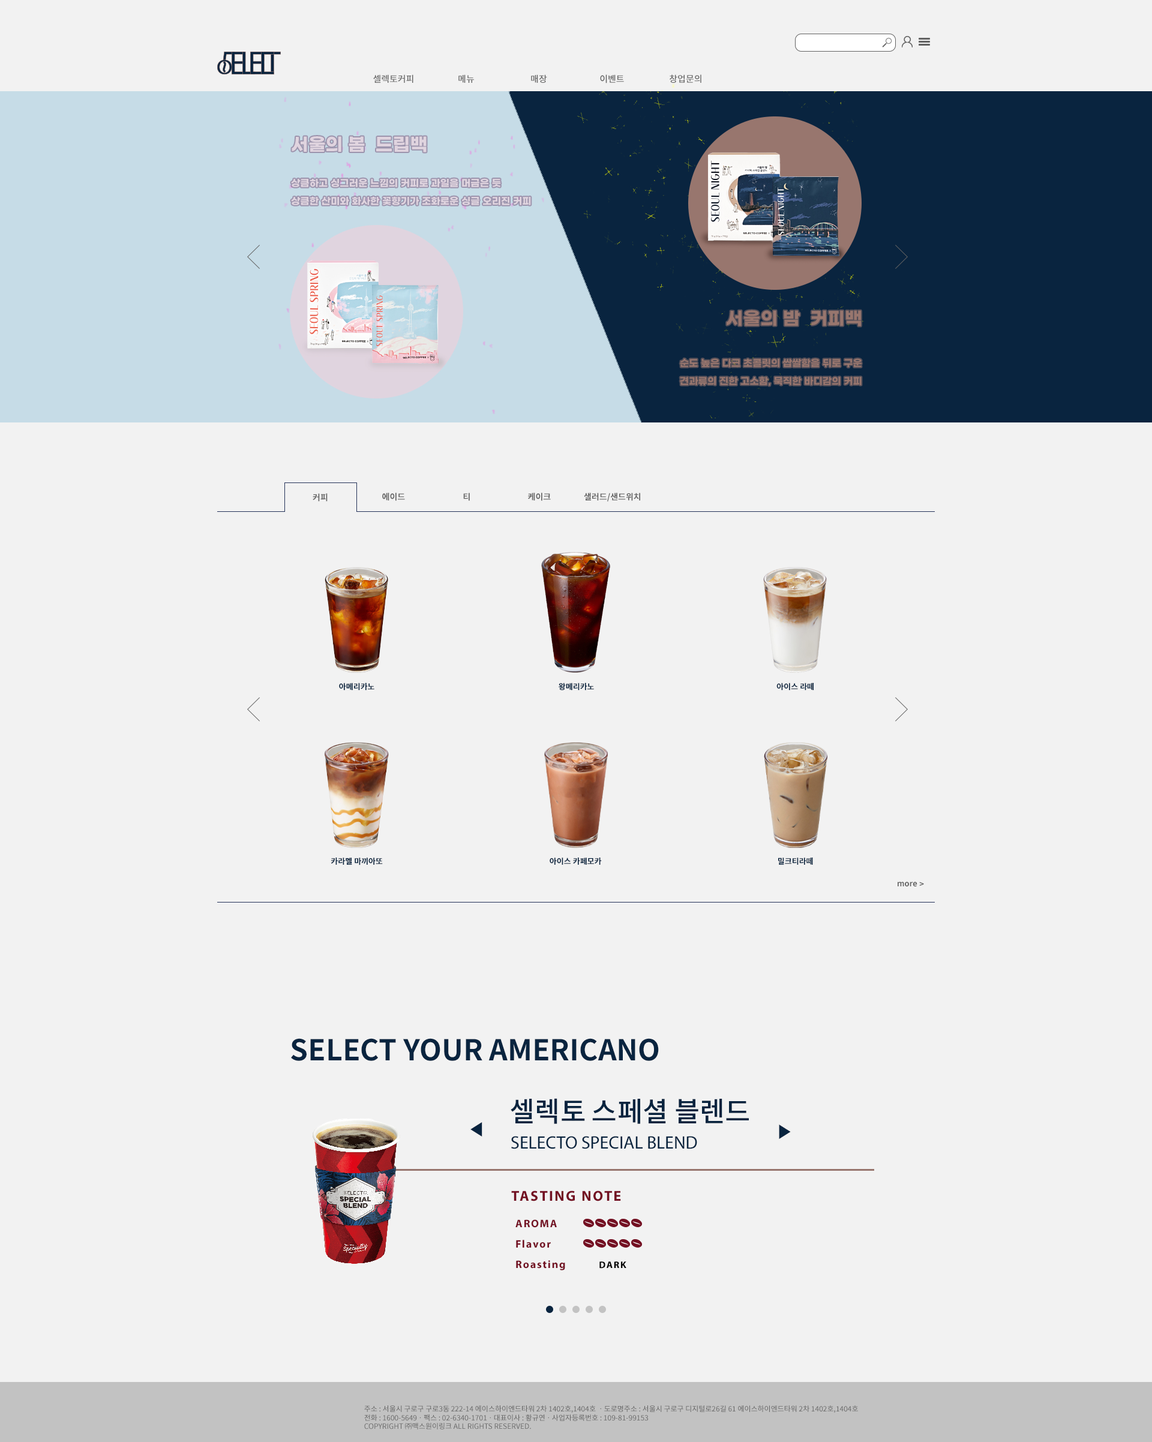
<style>
.page{position:relative;width:1152px;height:1442px;background:#f2f2f2}
.page>*{position:absolute;margin:0}
.t1{font:9px "NotoSansKR-Medium";color:#626262}
.t2{font:18px "GmarketSansBold";color:#e0d4df}
.t3{font:9.6px/18px "GmarketSansBold";color:#e0d4df}
.t4{font:18px "GmarketSansBold";color:#98766e}
.t5{font:9.6px/18px "GmarketSansBold";color:#98766e}
.t6{font:8.4px "NotoSansKR-Bold";color:#626262}
.t7{font:7.8px "NotoSansKR-Bold";color:#09243f}
.t8{font:7.8px "NotoSansKR-Bold";color:#626262}
.t9{font:28.8px "NotoSansKR-Bold";color:#09243f}
.t10{font:27.6px "NotoSansKR-Medium";color:#09243f}
.t11{font:18px "GmarketSansBold";color:#09243f}
.t12{font:18px "MyriadPro-Regular";color:#09243f}
.t13{font:14.4px "MyriadPro-Bold";letter-spacing:0.1em;color:#731022}
.t14{font:10.8px "MyriadPro-Bold";letter-spacing:0.1em;color:#731022}
.t15{font:9.6px "MyriadPro-Bold";letter-spacing:0.1em;color:#000000}
.t16{font:7.2px "NotoSansKR-Regular";color:#626262}
</style>
<div class="page">
<p class="t1" style="left:373px;top:74px;width:40px;height:9px">셀렉토커피</p>
<p class="t1" style="left:458px;top:74px;width:16px;height:9px">메뉴</p>
<p class="t1" style="left:531px;top:74px;width:16px;height:9px">매장</p>
<p class="t1" style="left:600px;top:74px;width:24px;height:9px">이벤트</p>
<p class="t1" style="left:670px;top:74px;width:31px;height:9px">창업문의</p>
<p class="t2" style="left:292px;top:136px;width:135px;height:16px">서울의 봄  드립백</p>
<p class="t3" style="left:291px;top:178px;width:240px;height:27px">상큼하고 싱그러운 느낌의 커피로 과일을 머금은 듯 <br>상큼한 산미와 화사한 꽃향기가 조화로운 싱글 오리진 커피</p>
<p class="t4" style="left:727px;top:310px;width:134px;height:16px">서울의 밤  커피백</p>
<p class="t5" style="left:680px;top:358px;width:182px;height:28px;text-align:right">순도 높은 다크 초콜릿의 쌉쌀함을 뒤로 구운<br>견과류의 진한 고소함, 묵직한 바디감의 커피</p>
<p class="t6" style="left:313px;top:493px;width:15px;height:9px">커피</p>
<p class="t6" style="left:382px;top:493px;width:23px;height:8px">에이드</p>
<p class="t6" style="left:463px;top:493px;width:7px;height:8px">티</p>
<p class="t6" style="left:528px;top:493px;width:23px;height:8px">케이크</p>
<p class="t6" style="left:584px;top:493px;width:56px;height:9px">샐러드/샌드위치</p>
<p class="t7" style="left:339px;top:683px;width:35px;height:7px">아메리카노</p>
<p class="t7" style="left:559px;top:683px;width:35px;height:7px">왕메리카노</p>
<p class="t7" style="left:776px;top:683px;width:38px;height:7px">아이스 라떼</p>
<p class="t7" style="left:331px;top:857px;width:52px;height:8px">카라멜 마끼아또</p>
<p class="t7" style="left:550px;top:857px;width:52px;height:8px">아이스 카페모카</p>
<p class="t7" style="left:778px;top:857px;width:35px;height:8px">밀크티라떼</p>
<p class="t8" style="left:898px;top:881px;width:19px;height:6px">more</p>
<p class="t8" style="left:919px;top:881px;width:5px;height:5px">&gt;</p>
<p class="t9" style="left:291px;top:1038px;width:368px;height:23px">SELECT YOUR AMERICANO</p>
<p class="t10" style="left:511px;top:1098px;width:238px;height:26px">셀렉토 스페셜 블렌드</p>
<p class="t11" style="left:470px;top:1122px;width:12px;height:14px">◀</p>
<p class="t11" style="left:779px;top:1124px;width:12px;height:15px;rotate:180deg">◀</p>
<p class="t12" style="left:511px;top:1136px;width:186px;height:13px">SELECTO SPECIAL BLEND</p>
<p class="t13" style="left:511px;top:1190px;width:110px;height:11px">TASTING NOTE</p>
<p class="t14" style="left:515px;top:1219px;width:42px;height:9px">AROMA</p>
<p class="t14" style="left:516px;top:1240px;width:35px;height:8px">Flavor</p>
<p class="t14" style="left:516px;top:1260px;width:49px;height:10px">Roasting</p>
<p class="t15" style="left:599px;top:1261px;width:27px;height:7px">DARK</p>
<p class="t16" style="left:364px;top:1405px;width:494px;height:24px">주소 : 서울시 구로구 구로3동 222-14 에이스하이엔드타워 2차 1402호,1404호 ㆍ도로명주소 : 서울시 구로구 디지털로26길 61 에이스하이엔드타워 2차 1402호,1404호<br>전화 : 1600-5649ㆍ팩스 : 02-6340-1701ㆍ대표이사 : 황규연ㆍ사업자등록번호 : 109-81-99153<br>COPYRIGHT ㈜맥스원이링크 ALL RIGHTS RESERVED.</p>
</div>
